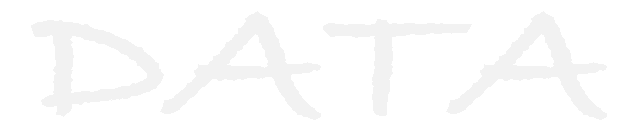
<style>
.page{position:relative;width:631px;height:133px;background:#ffffff}
.page>*{position:absolute;margin:0}
.t1{font:178.4px "BradleyHandITCTTBold";color:#f2f2f2;scale:1.2 1}
</style>
<div class="page">
<p class="t1" style="left:31px;top:11px;width:576px;height:109px">DATA</p>
</div>
